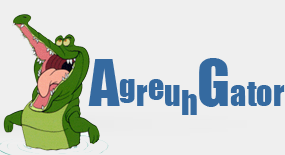
<style>
.page{position:relative;width:285px;height:155px;background:#efefef}
.page>*{position:absolute;margin:0}
.t1{font:32px "Impact";color:#356aa0}
.t2{font:60px "Impact";color:#356aa0}
</style>
<div class="page">
<p class="t1" style="left:88px;top:58px;width:197px;height:57px"><span class="t2">A</span>greuh<span class="t2">G</span>ator</p>
</div>
